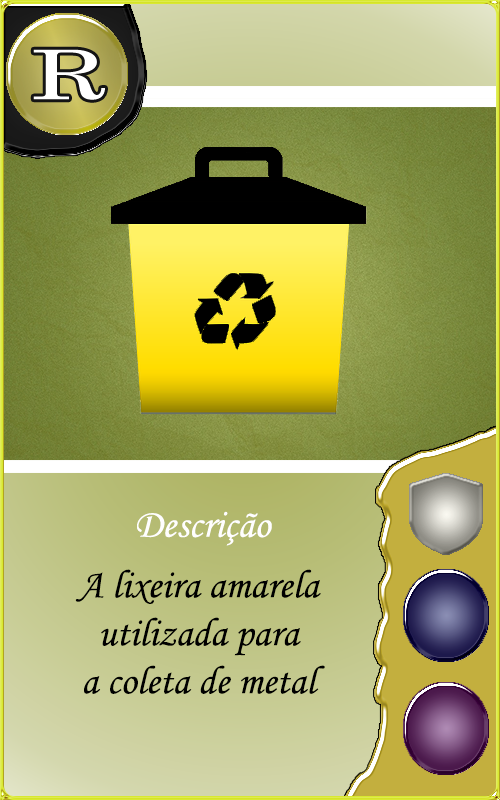
<style>
.page{position:relative;width:500px;height:800px}
.page>*{position:absolute;margin:0}
.t1{font:40px "MonotypeCorsiva";color:#fffefe}
.t2{font:40px "MonotypeCorsiva";color:#000000}
</style>
<div class="page">
<p class="t1" style="left:137px;top:511px;width:135px;height:35px">Descrição</p>
<p class="t2" style="left:75px;top:569px;width:250px;height:125px;text-align:center">A lixeira amarela<br>utilizada para<br>a coleta de metal</p>
</div>
